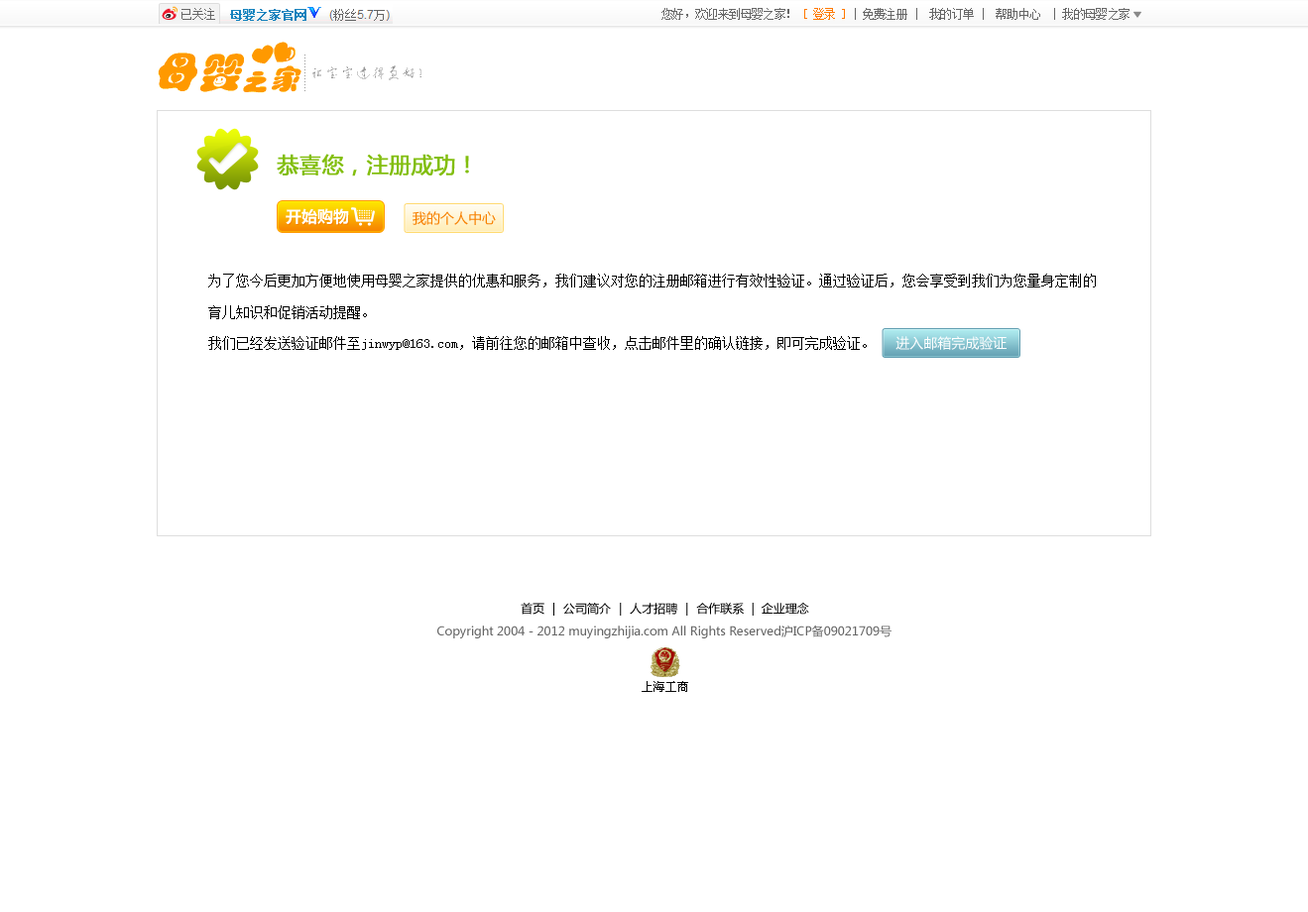
<style>
.page{position:relative;width:1308px;height:912px;background:#ffffff}
.page>*{position:absolute;margin:0}
.t1{font:11.9px "SimSun";letter-spacing:-0.05em;color:#666666}
.t2{font:11.9px "SimSun";letter-spacing:-0.05em;color:#ff7800}
.t3{font:21.8px "MicrosoftYaHei";color:#82be0e;font-weight:bold}
.t4{font:15.9px "MicrosoftYaHei-Bold";color:#ffffff}
.t5{font:13.9px "MicrosoftYaHei";color:#f78000}
.t6{font:13.9px/31.3px "SimSun";color:#000000}
.t7{font:13.9px "MicrosoftYaHei";color:#ffffff}
.t8{font:11.9px "MicrosoftYaHei";color:#000000}
.t9{font:11.9px "MicrosoftYaHei";color:#666666}
</style>
<div class="page">
<p class="t1" style="left:661px;top:8px;width:468px;height:12px">您好，欢迎来到母婴之家！ <span class="t2">[ 登录 ]</span> | 免费注册 |  我的订单 |  帮助中心  | 我的母婴之家</p>
<p class="t3" style="left:277px;top:154px;width:192px;height:22px">恭喜您，注册成功！</p>
<p class="t4" style="left:285px;top:208px;width:64px;height:17px">开始购物</p>
<p class="t5" style="left:412px;top:211px;width:84px;height:14px">我的个人中心</p>
<p class="t6" style="left:208px;top:274px;width:887px;height:76px">为了您今后更加方便地使用母婴之家提供的优惠和服务，我们建议对您的注册邮箱进行有效性验证。通过验证后，您会享受到我们为您量身定制的育儿知识和促销活动提醒。<br>我们已经发送验证邮件至jinwyp@163.com，请前往您的邮箱中查收，点击邮件里的确认链接，即可完成验证。</p>
<p class="t7" style="left:895px;top:336px;width:111px;height:14px">进入邮箱完成验证</p>
<p class="t8" style="left:520px;top:603px;width:289px;height:13px">首页 ｜ 公司简介 ｜ 人才招聘 ｜ 合作联系  |  企业理念</p>
<p class="t9" style="left:437px;top:625px;width:454px;height:13px">Copyright 2004 - 2012 muyingzhijia.com All Rights Reserved沪ICP备09021709号</p>
</div>
